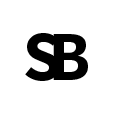
<style>
.page{position:relative;width:114px;height:114px;background:#ffffff}
.page>*{position:absolute;margin:0}
.t1{font:70px "SourceSansPro-Bold";letter-spacing:-0.2em;color:#000000}
</style>
<div class="page">
<p class="t1" style="left:25px;top:33px;width:63px;height:48px">SB</p>
</div>
